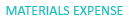
<style>
.page{position:relative;width:129px;height:21px;background:#ffffff}
.page>*{position:absolute;margin:0}
.t1{font:14px "Calibri";color:#1dbdc0}
</style>
<div class="page">
<p class="t1" style="left:6px;top:6px;width:117px;height:9px">MATERIALS EXPENSE</p>
</div>
